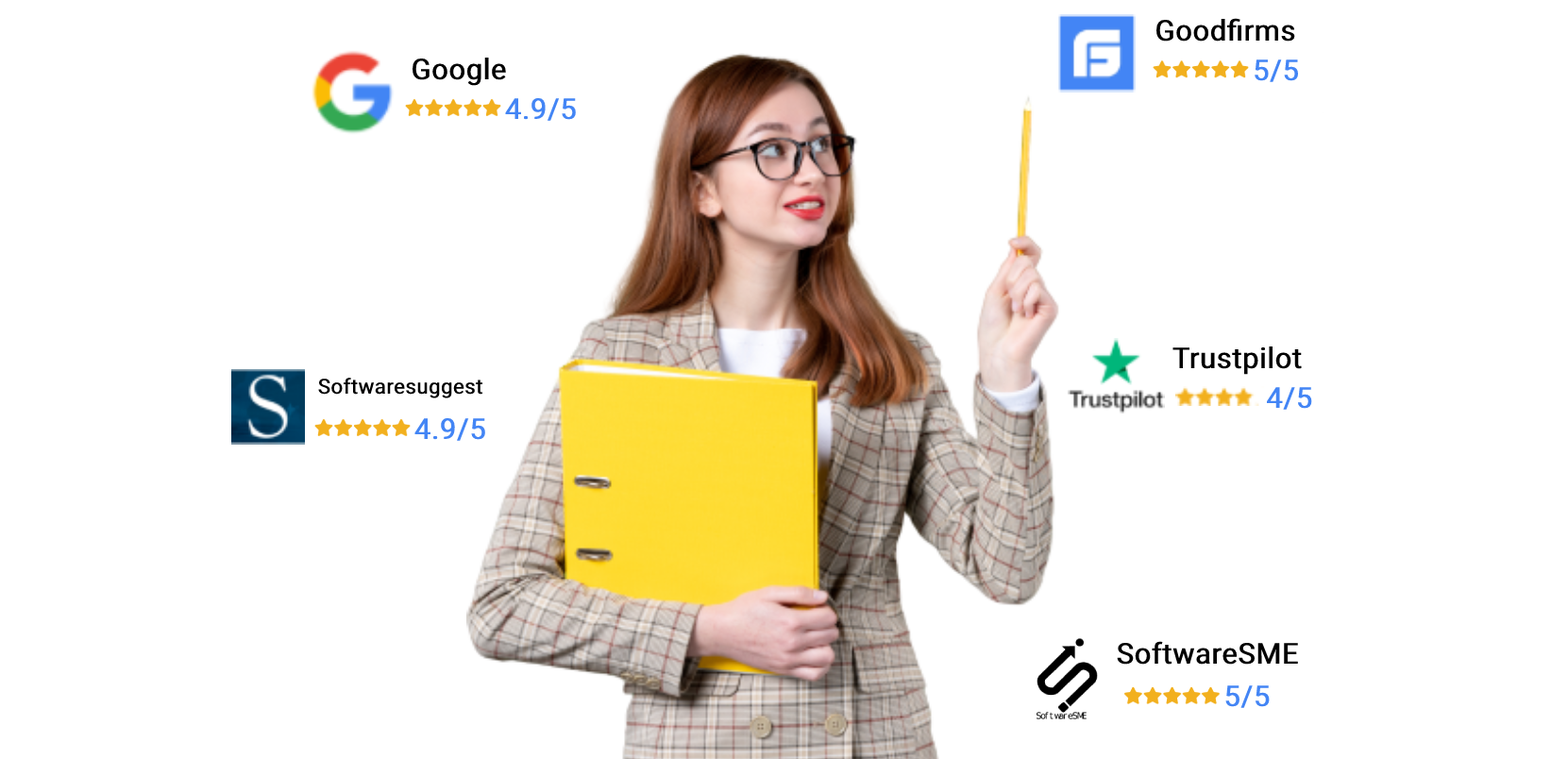
<style>
.page{position:relative;width:1568px;height:759px;background:#ffffff}
.page>*{position:absolute;margin:0}
.t1{font:28.9px "Roboto-Regular";color:#000000;font-weight:bold}
.t2{font:28.9px "Roboto-Regular";color:#4385f5;font-weight:bold}
.t3{font:20.8px "Roboto-Regular";color:#000000;font-weight:bold}
</style>
<div class="page">
<p class="t1" style="left:1156px;top:18px;width:139px;height:24px">Goodfirms</p>
<p class="t1" style="left:413px;top:58px;width:93px;height:28px">Google</p>
<p class="t2" style="left:1255px;top:59px;width:43px;height:23px">5/5</p>
<p class="t2" style="left:505px;top:98px;width:71px;height:23px">4.9/5</p>
<p class="t1" style="left:1172px;top:346px;width:130px;height:29px">Trustpilot</p>
<p class="t3" style="left:318px;top:378px;width:164px;height:20px">Softwaresuggest</p>
<p class="t2" style="left:1267px;top:387px;width:45px;height:23px">4/5</p>
<p class="t2" style="left:414px;top:418px;width:71px;height:23px">4.9/5</p>
<p class="t1" style="left:1117px;top:641px;width:181px;height:24px">SoftwareSME</p>
<p class="t2" style="left:1225px;top:685px;width:45px;height:23px">5/5</p>
</div>
